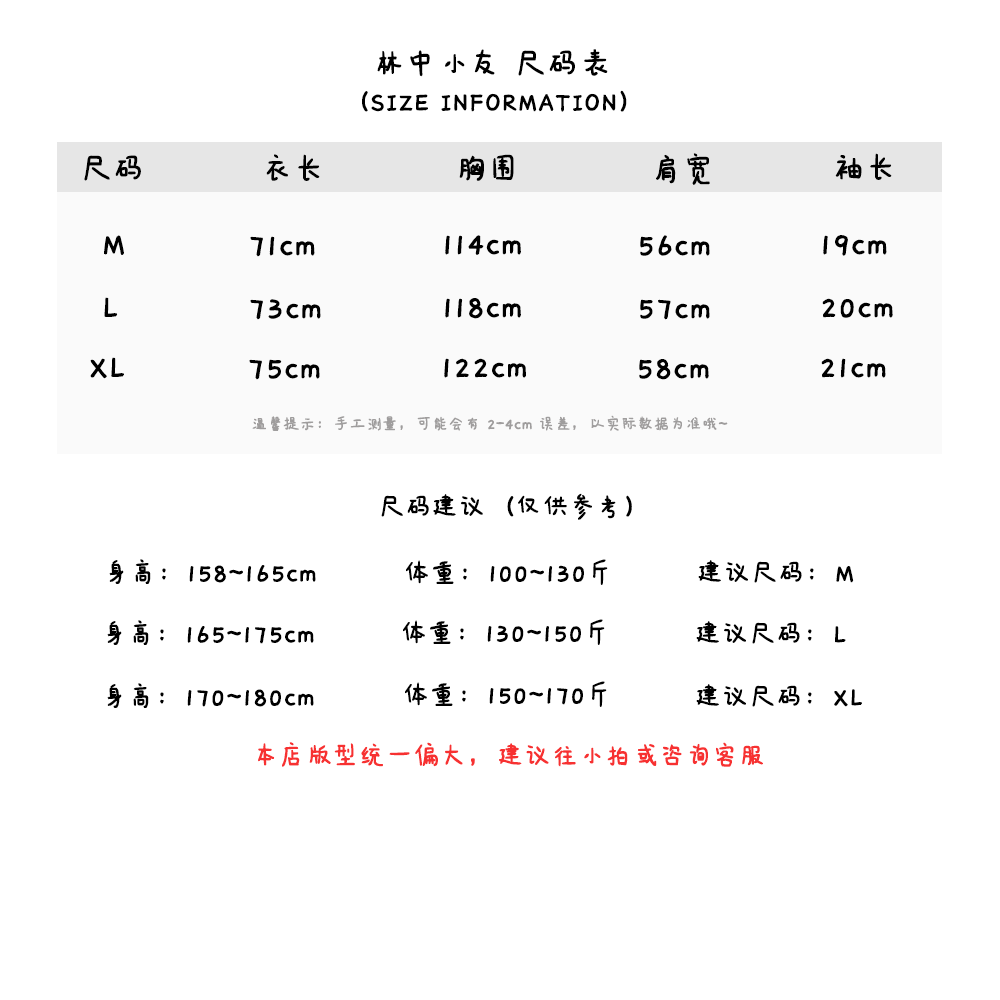
<style>
.page{position:relative;width:1000px;height:1000px;background:#ffffff}
.page>*{position:absolute;margin:0}
.t1{font:36px "IdeaFonts-QianXiaTi";color:#000000;font-weight:bold}
.t2{font:30px "IdeaFonts-QianXiaTi";color:#000000;font-weight:bold}
.t3{font:18px "IdeaFonts-QianXiaTi";color:#9f9d9d;font-weight:bold}
.t4{font:30px "IdeaFonts-QianXiaTi";color:#f73131;font-weight:bold}
</style>
<div class="page">
<p class="t1" style="left:377px;top:49px;width:231px;height:28px">林中小友 尺码表</p>
<p class="t2" style="left:362px;top:90px;width:265px;height:22px">（SIZE INFORMATION）</p>
<p class="t1" style="left:84px;top:155px;width:57px;height:26px">尺码</p>
<p class="t1" style="left:266px;top:154px;width:54px;height:27px">衣长</p>
<p class="t1" style="left:459px;top:154px;width:55px;height:27px">胸围</p>
<p class="t1" style="left:656px;top:153px;width:54px;height:32px">肩宽</p>
<p class="t1" style="left:835px;top:153px;width:57px;height:27px">袖长</p>
<p class="t1" style="left:104px;top:235px;width:20px;height:20px">M</p>
<p class="t1" style="left:250px;top:236px;width:65px;height:21px">71cm</p>
<p class="t1" style="left:445px;top:235px;width:76px;height:20px">114cm</p>
<p class="t1" style="left:640px;top:235px;width:70px;height:21px">56cm</p>
<p class="t1" style="left:823px;top:235px;width:64px;height:21px">19cm</p>
<p class="t1" style="left:104px;top:297px;width:14px;height:20px">L</p>
<p class="t1" style="left:250px;top:299px;width:71px;height:21px">73cm</p>
<p class="t1" style="left:445px;top:298px;width:76px;height:21px">118cm</p>
<p class="t1" style="left:640px;top:299px;width:70px;height:21px">57cm</p>
<p class="t1" style="left:822px;top:298px;width:71px;height:20px">20cm</p>
<p class="t1" style="left:90px;top:357px;width:34px;height:22px">XL</p>
<p class="t1" style="left:249px;top:359px;width:71px;height:21px">75cm</p>
<p class="t1" style="left:444px;top:358px;width:82px;height:20px">122cm</p>
<p class="t1" style="left:639px;top:359px;width:70px;height:21px">58cm</p>
<p class="t1" style="left:821px;top:358px;width:65px;height:20px">21cm</p>
<p class="t3" style="left:252px;top:415px;width:476px;height:16px">温馨提示：手工测量，可能会有 2-4cm 误差，以实际数据为准哦~</p>
<p class="t2" style="left:381px;top:493px;width:251px;height:27px">尺码建议（仅供参考）</p>
<p class="t2" style="left:109px;top:559px;width:207px;height:25px">身高：158~165cm</p>
<p class="t2" style="left:406px;top:559px;width:202px;height:26px">体重：100~130斤</p>
<p class="t2" style="left:698px;top:560px;width:156px;height:23px">建议尺码：M</p>
<p class="t2" style="left:107px;top:620px;width:207px;height:25px">身高：165~175cm</p>
<p class="t2" style="left:403px;top:619px;width:202px;height:26px">体重：130~150斤</p>
<p class="t2" style="left:696px;top:621px;width:150px;height:23px">建议尺码：L</p>
<p class="t2" style="left:107px;top:683px;width:207px;height:25px">身高：170~180cm</p>
<p class="t2" style="left:405px;top:681px;width:202px;height:26px">体重：150~170斤</p>
<p class="t2" style="left:696px;top:684px;width:166px;height:23px">建议尺码：XL</p>
<p class="t4" style="left:258px;top:742px;width:505px;height:25px">本店版型统一偏大，建议往小拍或咨询客服</p>
</div>
